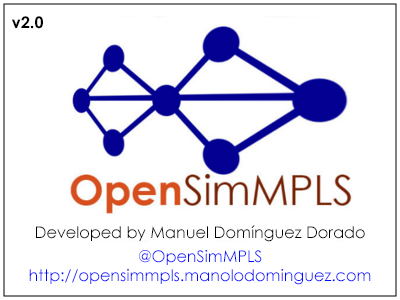
<style>
.page{position:relative;width:400px;height:300px;background:#ffffff}
.page>*{position:absolute;margin:0}
.t1{font:16px "CenturyGothic-Bold";color:#000000}
.t2{font:16px "CenturyGothic";color:#000000}
.t3{font:16px "CenturyGothic";color:#000cff}
</style>
<div class="page">
<p class="t1" style="left:12px;top:16px;width:31px;height:13px">v2.0</p>
<p class="t2" style="left:36px;top:225px;width:329px;height:17px">Developed by Manuel Domínguez Dorado</p>
<p class="t3" style="left:139px;top:250px;width:123px;height:15px">@OpenSimMPLS</p>
<p class="t3" style="left:29px;top:269px;width:342px;height:16px">http://opensimmpls.manolodominguez.com</p>
</div>
